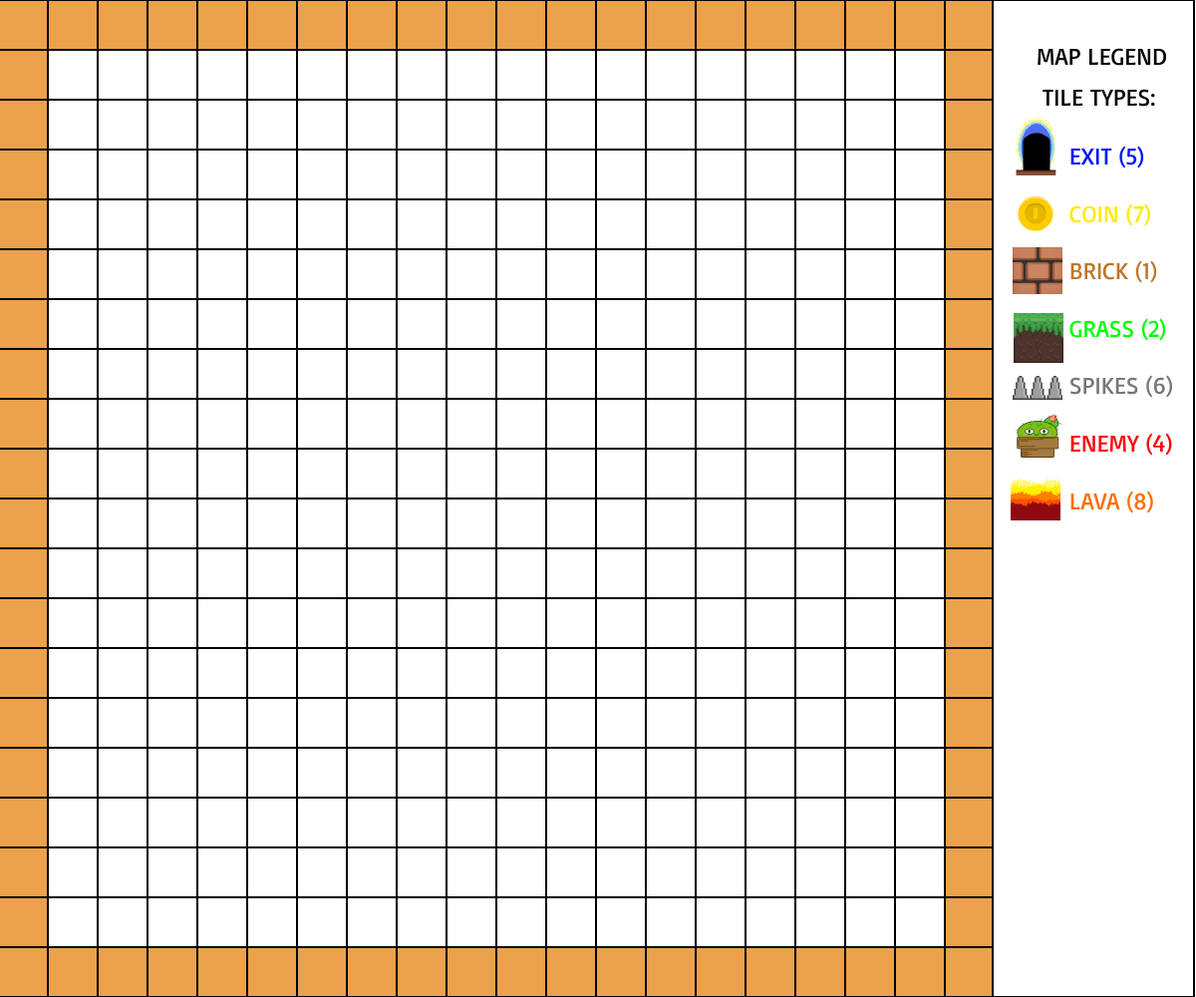
<style>
.page{position:relative;width:1196px;height:997px;background:#ffffff}
.page>*{position:absolute;margin:0}
.t1{font:23.9px "Basic-Regular";color:#000000}
.t2{font:23.9px "Basic-Regular";color:#777777}
.t3{font:23.9px "Basic-Regular";color:#0011ff}
.t4{font:23.9px "Basic-Regular";color:#ffe900}
.t5{font:23.9px "Basic-Regular";color:#bd7727}
.t6{font:23.9px "Basic-Regular";color:#00ff00}
.t7{font:23.9px "Basic-Regular";color:#ff0000}
.t8{font:23.9px "Basic-Regular";color:#ff6e00}
</style>
<div class="page">
<p class="t1" style="left:1038px;top:48px;width:129px;height:18px">MAP LEGEND</p>
<p class="t1" style="left:1043px;top:89px;width:112px;height:18px">TILE TYPES:</p>
<p class="t2" style="left:1070px;top:146px;width:103px;height:367px"><span class="t3">EXIT (5)<br><br></span><span class="t4">COIN (7)<br><br></span><span class="t5">BRICK (1)<br><br></span><span class="t6">GRASS (2)<br><br></span>SPIKES (6)<br><br><span class="t7">ENEMY (4)<br><br></span><span class="t8">LAVA (8)</span></p>
</div>
